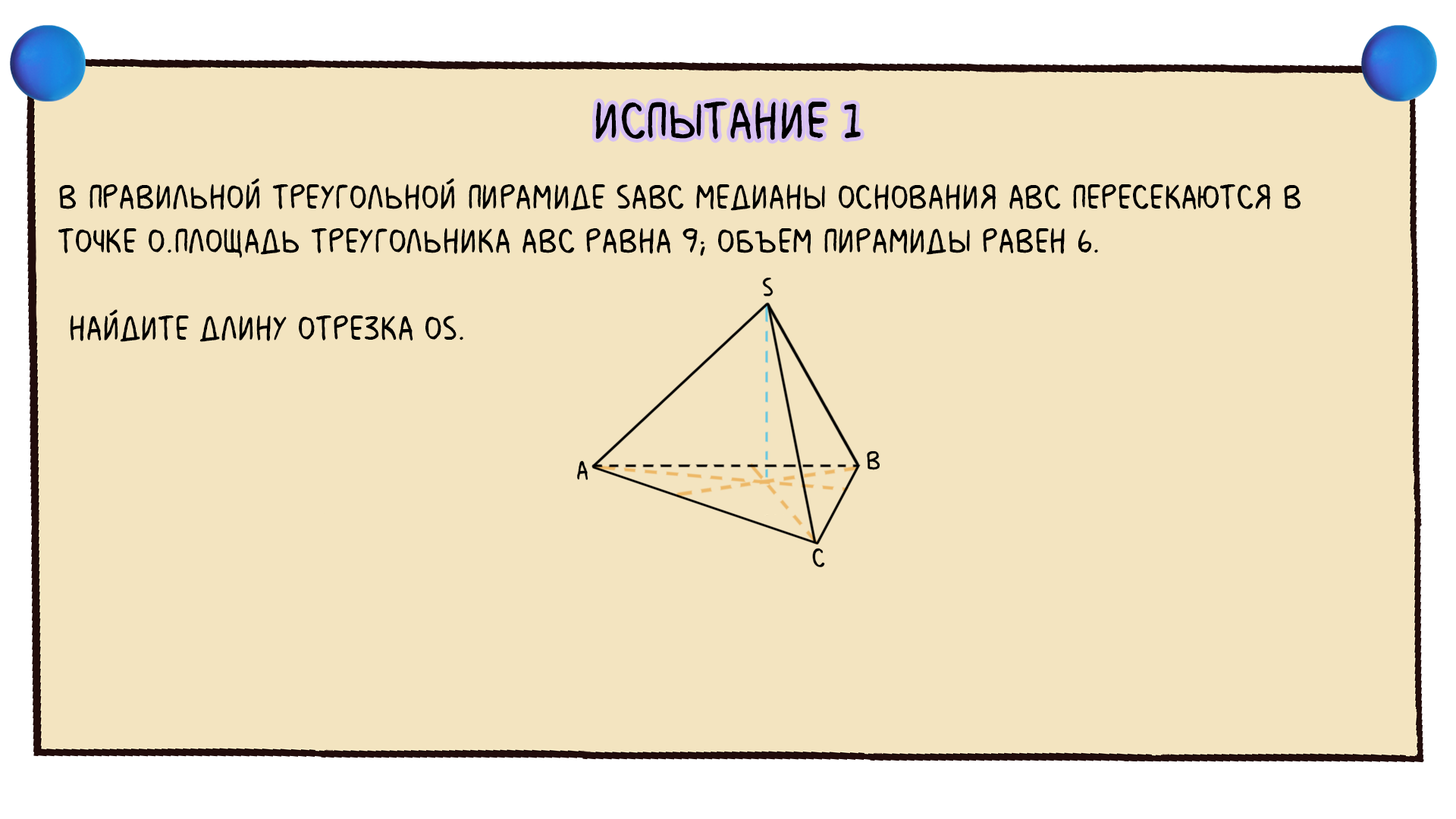
<style>
.page{position:relative;width:1456px;height:819px;background:#f3e4c0}
.page>*{position:absolute;margin:0}
.t1{font:54.6px "MilkMustacheBB";color:#000000}
.t2{font:36.4px "MilkMustacheBB";color:#000000}
</style>
<div class="page">
<p class="t1" style="left:595px;top:101px;width:266px;height:39px">испытание 1</p>
<p class="t2" style="left:58px;top:178px;width:1243px;height:164px">В правильной треугольной пирамиде SABC медианы основания ABC пересекаются в <br>точке O.Площадь треугольника ABC равна 9; объем пирамиды равен 6.<br><br> Найдите длину отрезка OS.</p>
</div>
